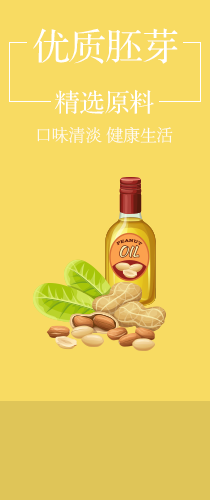
<style>
.page{position:relative;width:210px;height:500px;background:#f8db62}
.page>*{position:absolute;margin:0}
.t1{font:36.5px "FZS3JW--GB1-0";color:#ffffff}
.t2{font:25px "FZS3JW--GB1-0";color:#ffffff}
.t3{font:16.7px "FZSYJW--GB1-0";color:#ffffff}
</style>
<div class="page">
<p class="t1" style="left:33px;top:28px;width:145px;height:36px">优质胚芽</p>
<p class="t2" style="left:54px;top:89px;width:100px;height:25px">精选原料</p>
<p class="t3" style="left:37px;top:126px;width:136px;height:18px">口味清淡 健康生活</p>
</div>
